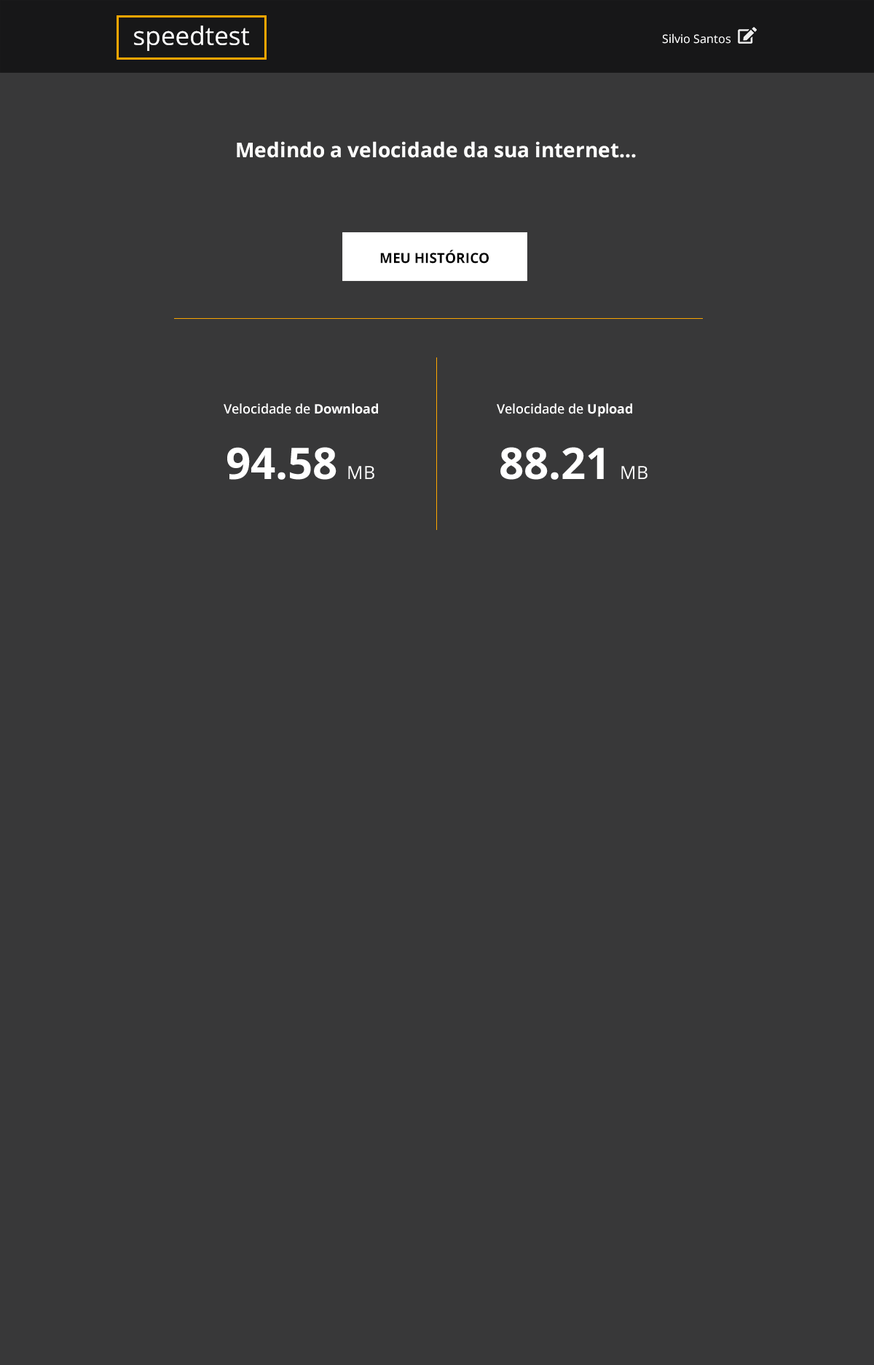
<style>
.page{position:relative;width:874px;height:1365px;background:#383839}
.page>*{position:absolute;margin:0}
.t1{font:25.4px "OpenSans";color:#ffffff}
.t2{font:11.6px "OpenSans";color:#ffffff}
.t3{font:20.4px "OpenSans-Bold";color:#ffffff}
.t4{font:13.9px "OpenSans-Bold";color:#000000;text-transform:uppercase}
.t5{font:13.1px "OpenSans-Semibold";color:#ffffff}
.t6{font:13.1px "OpenSans-Bold";color:#ffffff}
.t7{font:43.7px "OpenSans-Bold";color:#ffffff}
.t8{font:18.2px "OpenSans";color:#ffffff}
</style>
<div class="page">
<p class="t1" style="left:134px;top:25px;width:115px;height:26px">speedtest</p>
<p class="t2" style="left:662px;top:33px;width:68px;height:11px">Silvio Santos</p>
<p class="t3" style="left:237px;top:141px;width:399px;height:17px">Medindo a velocidade da sua internet...</p>
<p class="t4" style="left:380px;top:250px;width:108px;height:14px">MEU Histórico</p>
<p class="t5" style="left:223px;top:403px;width:155px;height:11px">Velocidade de <span class="t6">Download</span></p>
<p class="t5" style="left:496px;top:403px;width:136px;height:14px">Velocidade de <span class="t6">Upload</span></p>
<p class="t7" style="left:227px;top:447px;width:147px;height:33px">94.58 <span class="t8">MB</span></p>
<p class="t7" style="left:500px;top:447px;width:147px;height:33px">88.21 <span class="t8">MB</span></p>
</div>
